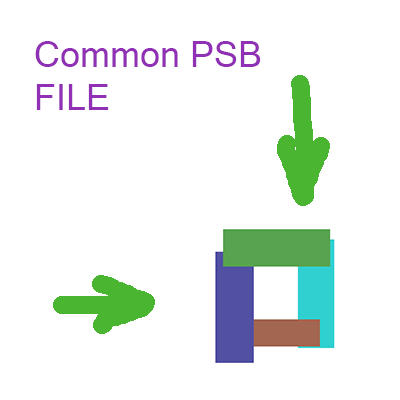
<style>
.page{position:relative;width:400px;height:400px;background:#ffffff}
.page>*{position:absolute;margin:0}
.t1{font:36px "MicrosoftSansSerif";color:#9031b5}
</style>
<div class="page">
<p class="t1" style="left:35px;top:41px;width:226px;height:69px">Common PSB FILE</p>
</div>
